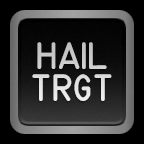
<style>
.page{position:relative;width:144px;height:144px;background:#000000}
.page>*{position:absolute;margin:0}
.t1{font:26.7px "MS-33558-Regular";color:#d9d9d9}
</style>
<div class="page">
<p class="t1" style="left:32px;top:42px;width:80px;height:59px;text-align:center">hail<br>trgt</p>
</div>
